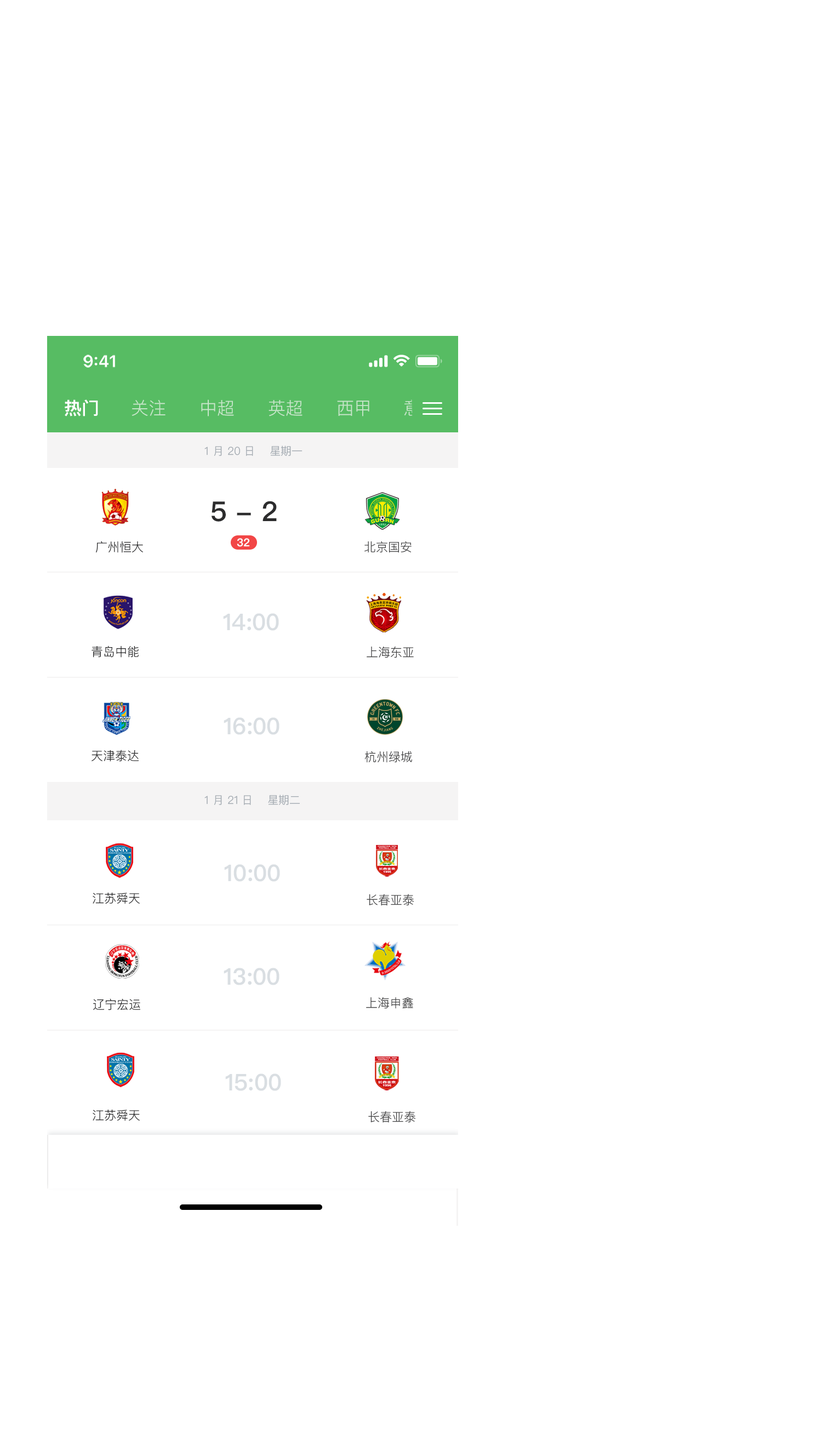
<style>
.page{position:relative;width:822px;height:1451px;background:#ffffff}
.page>*{position:absolute;margin:0}
.t1{font:16.4px "SFProText-Semibold";letter-spacing:-0.02em;color:#ffffff}
.t2{font:18.6px "SFProText-Semibold";letter-spacing:-0.02em;color:#ffffff}
.t3{font:17.5px "PingFangSC-Semibold";color:#ffffff}
.t4{font:17.5px "PingFangSC-Light";color:#c7e6ca}
.t5{font:11px "PingFangSC-Light";color:#a5acb3}
.t6{font:27.4px "PingFangSC-Semibold";color:#2c2c2d}
.t7{font:12.1px "PingFangSC-Light";color:#2c2c2d}
.t8{font:11px "PingFangSC-Semibold";color:#ffffff}
.t9{font:12.1px "PingFangSC-Light";color:#444445}
.t10{font:23px "PingFangSC-Semibold";color:#d9dee2}
</style>
<div class="page">
<p class="t1" style="left:83px;top:355px;width:32px;height:13px">9:41</p>
<p class="t2" style="left:393px;top:355px;width:17px;height:12px">􀙇</p>
<p class="t3" style="left:65px;top:399px;width:33px;height:17px">热门</p>
<p class="t4" style="left:131px;top:399px;width:34px;height:17px">关注</p>
<p class="t4" style="left:201px;top:399px;width:33px;height:17px">中超</p>
<p class="t4" style="left:268px;top:400px;width:34px;height:16px">英超</p>
<p class="t4" style="left:337px;top:401px;width:32px;height:15px">西甲</p>
<p class="t5" style="left:204px;top:445px;width:98px;height:11px">1 月 20 日    星期一</p>
<p class="t6" style="left:211px;top:501px;width:66px;height:21px">5 - 2</p>
<p class="t7" style="left:96px;top:541px;width:47px;height:12px">广州恒大</p>
<p class="t8" style="left:237px;top:538px;width:13px;height:9px">32</p>
<p class="t9" style="left:364px;top:541px;width:47px;height:12px">北京国安</p>
<p class="t10" style="left:223px;top:613px;width:56px;height:18px">14:00</p>
<p class="t7" style="left:92px;top:645px;width:47px;height:12px">青岛中能</p>
<p class="t9" style="left:367px;top:646px;width:47px;height:12px">上海东亚</p>
<p class="t10" style="left:224px;top:717px;width:55px;height:18px">16:00</p>
<p class="t7" style="left:92px;top:750px;width:47px;height:12px">天津泰达</p>
<p class="t9" style="left:364px;top:751px;width:49px;height:12px">杭州绿城</p>
<p class="t5" style="left:204px;top:794px;width:96px;height:11px">1 月 21 日    星期二</p>
<p class="t10" style="left:224px;top:864px;width:56px;height:18px">10:00</p>
<p class="t7" style="left:93px;top:893px;width:47px;height:11px">江苏舜天</p>
<p class="t9" style="left:367px;top:894px;width:47px;height:12px">长春亚泰</p>
<p class="t10" style="left:224px;top:968px;width:55px;height:17px">13:00</p>
<p class="t7" style="left:93px;top:998px;width:47px;height:12px">辽宁宏运</p>
<p class="t9" style="left:366px;top:997px;width:47px;height:12px">上海申鑫</p>
<p class="t10" style="left:225px;top:1073px;width:56px;height:18px">15:00</p>
<p class="t7" style="left:93px;top:1110px;width:47px;height:11px">江苏舜天</p>
<p class="t9" style="left:368px;top:1111px;width:48px;height:12px">长春亚泰</p>
</div>
